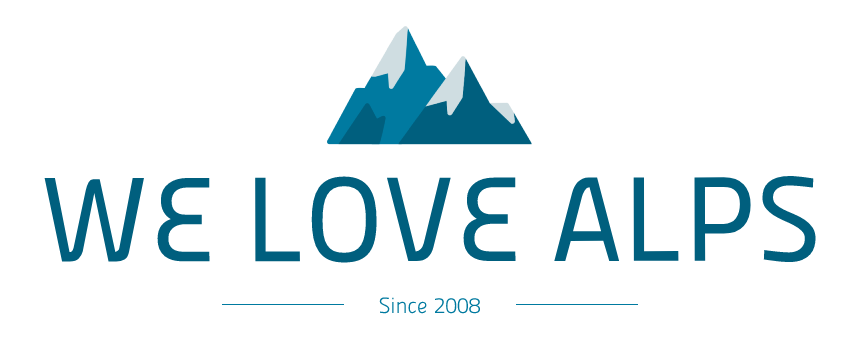
<style>
.page{position:relative;width:860px;height:340px;background:#ffffff}
.page>*{position:absolute;margin:0}
.t1{font:120px "Panefresco500wt-Regular";color:#005f7e}
.t2{font:22px "Panefresco250wt-Regular";color:#007aa0}
</style>
<div class="page">
<p class="t1" style="left:44px;top:175px;width:772px;height:88px">WE LOVE ALPS</p>
<p class="t2" style="left:379px;top:297px;width:101px;height:17px">Since 2008</p>
</div>
